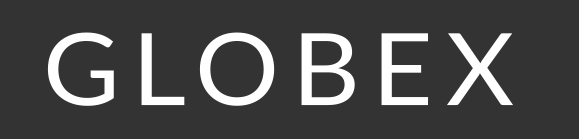
<style>
.page{position:relative;width:579px;height:139px;background:#333333}
.page>*{position:absolute;margin:0}
.t1{font:100px "Lato-Regular";letter-spacing:0.12em;color:#ffffff;scale:1.05 1}
</style>
<div class="page">
<p class="t1" style="left:47px;top:32px;width:466px;height:74px">GLOBEX</p>
</div>
